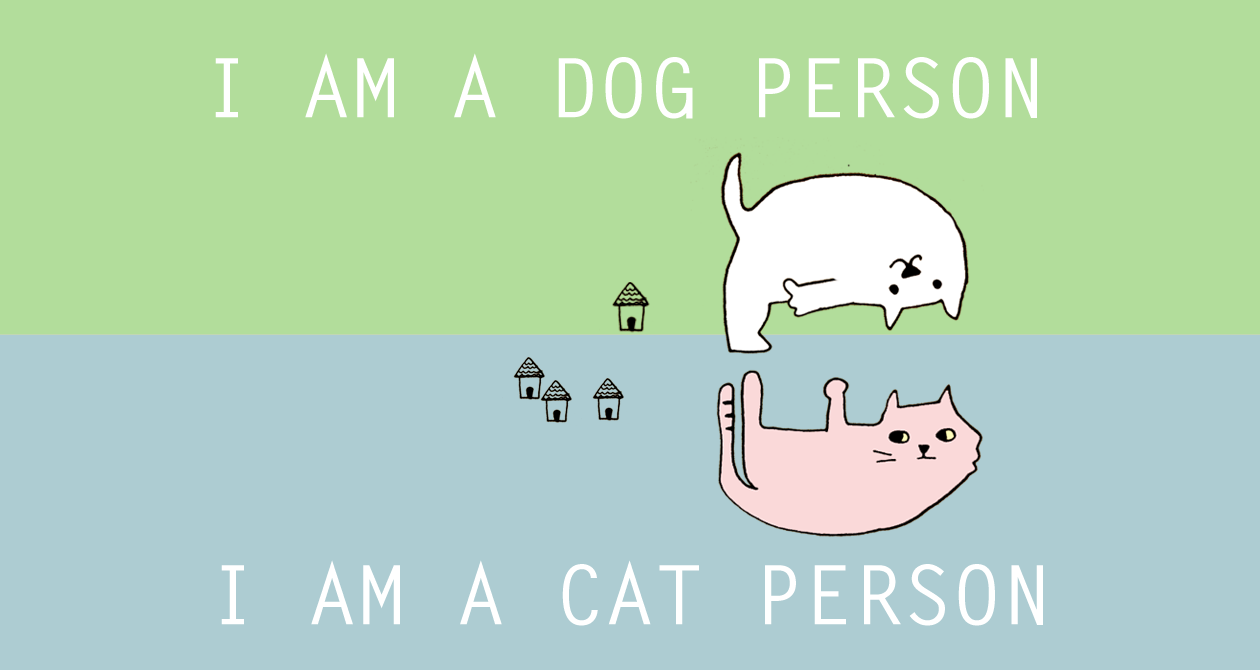
<style>
.page{position:relative;width:1260px;height:670px;background:#adccd2}
.page>*{position:absolute;margin:0}
.t1{font:82px "LetterGothicStd-Bold";letter-spacing:0.005em;color:#ffffff}
</style>
<div class="page">
<p class="t1" style="left:215px;top:53px;width:822px;height:66px">I AM A DOG PERSON</p>
<p class="t1" style="left:221px;top:560px;width:822px;height:66px">I AM A CAT PERSON</p>
</div>
